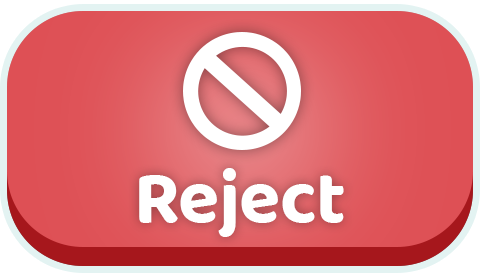
<style>
.page{position:relative;width:480px;height:277px}
.page>*{position:absolute;margin:0}
.t1{font:76px "BalooDa2-Bold";letter-spacing:-0.01em;color:#ffffff}
</style>
<div class="page">
<p class="t1" style="left:139px;top:168px;width:205px;height:69px">Reject</p>
</div>
